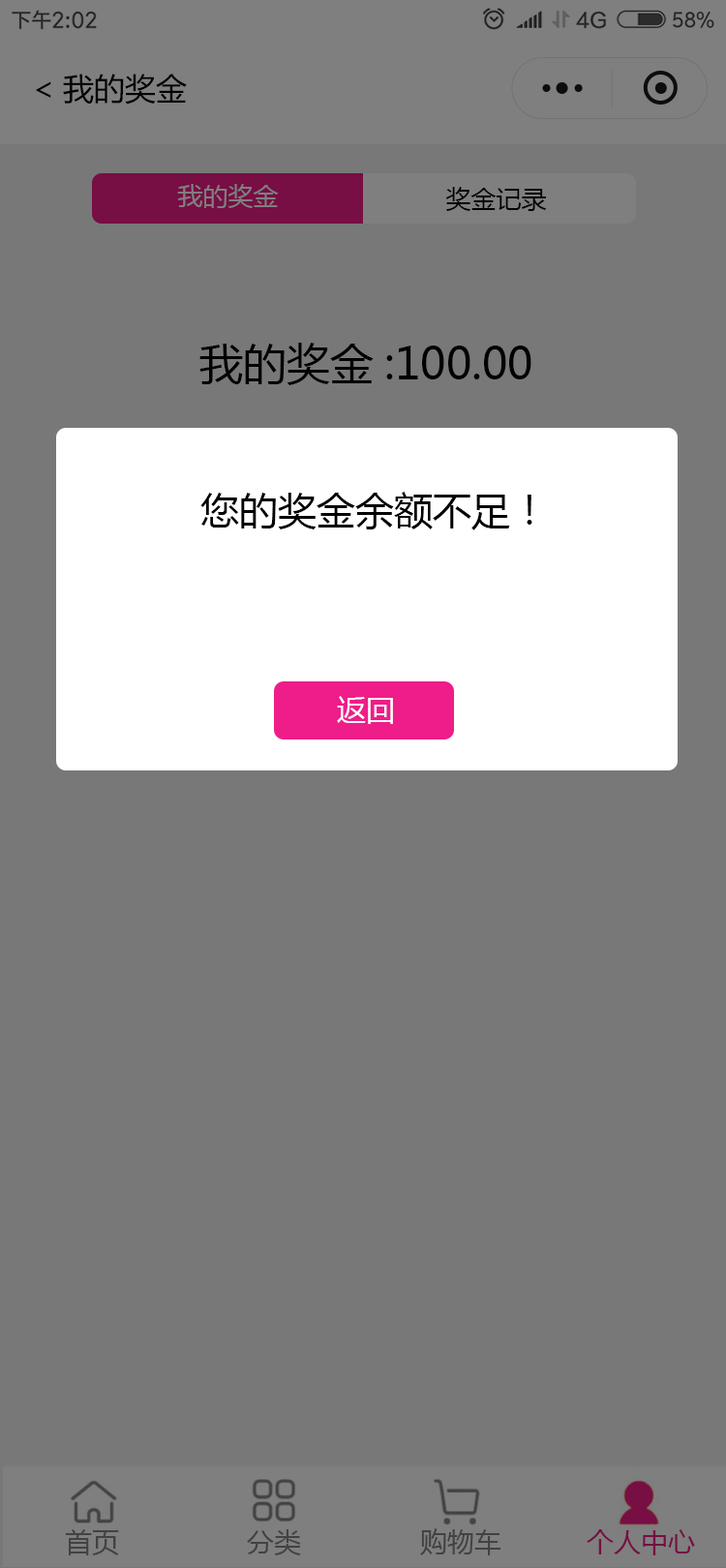
<style>
.page{position:relative;width:726px;height:1568px;background:#787878}
.page>*{position:absolute;margin:0}
.t1{font:31px "MicrosoftYaHei";color:#000000}
.t2{font:25.2px "MicrosoftYaHei";color:#7f7f7f}
.t3{font:25.2px "MicrosoftYaHei";color:#000000}
.t4{font:43.6px "MicrosoftYaHei";color:#000000}
.t5{font:38.7px "MicrosoftYaHei";color:#000000}
.t6{font:29px "MicrosoftYaHei";color:#ffffff}
</style>
<div class="page">
<p class="t1" style="left:36px;top:74px;width:151px;height:31px">&lt;我的奖金</p>
<p class="t2" style="left:177px;top:184px;width:102px;height:24px">我的奖金</p>
<p class="t3" style="left:445px;top:187px;width:102px;height:24px">奖金记录</p>
<p class="t4" style="left:199px;top:343px;width:332px;height:42px">我的奖金:100.00</p>
<p class="t5" style="left:200px;top:492px;width:332px;height:38px">您的奖金余额不足！</p>
<p class="t6" style="left:337px;top:696px;width:56px;height:28px">返回</p>
</div>
